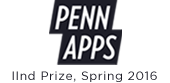
<style>
.page{position:relative;width:170px;height:83px;background:#ffffff}
.page>*{position:absolute;margin:0}
.t1{font:12px "GothamBook";letter-spacing:0.05em;color:#1e1e28}
</style>
<div class="page">
<p class="t1" style="left:12px;top:71px;width:145px;height:11px">IInd Prize, Spring 2016</p>
</div>
